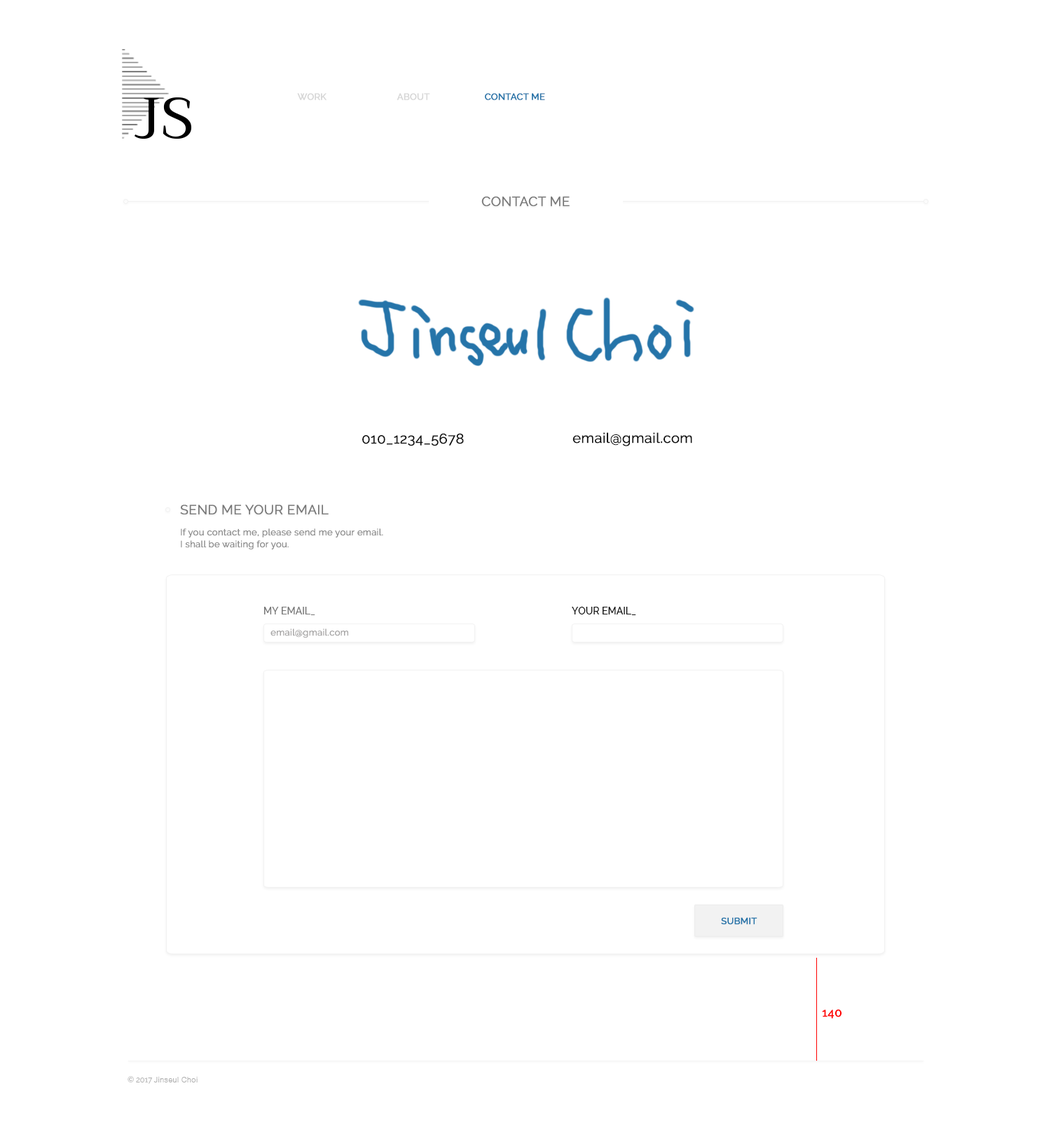
<style>
.page{position:relative;width:1051px;height:1135px;background:#ffffff}
.page>*{position:absolute;margin:0}
.t1{font:9.1px "Raleway-Medium";color:#d7d7d7;font-weight:bold}
.t2{font:9.1px "Raleway-Medium";color:#2574a9;font-weight:bold}
.t3{font:13.3px "Raleway-Regular";color:#777777;text-transform:uppercase;font-weight:bold}
.t4{font:14px "Raleway-Regular";color:#111111;text-transform:uppercase;font-weight:bold}
.t5{font:14px "Raleway-Regular";color:#111111;font-weight:bold}
.t6{font:9.1px "Raleway-Regular";color:#8e8e8e;font-weight:bold}
.t7{font:9.8px "Raleway-Medium";color:#777777;text-transform:uppercase}
.t8{font:9.8px "Raleway-Medium";color:#111111;text-transform:uppercase}
.t9{font:9.1px "Raleway-Regular";color:#a6a5a5;font-weight:bold}
.t10{font:9.1px "Raleway-Medium";color:#2574a9;text-transform:uppercase;font-weight:bold}
.t11{font:11.9px "Raleway-Medium";color:#ff0000;text-transform:uppercase;font-weight:bold}
.t12{font:7.7px "Gulim";color:#afafaf}
.t13{font:7.7px "Raleway-Regular";color:#afafaf}
</style>
<div class="page">
<p class="t1" style="left:297px;top:93px;width:29px;height:7px">WORK</p>
<p class="t1" style="left:396px;top:93px;width:34px;height:7px">ABOUT</p>
<p class="t2" style="left:485px;top:93px;width:60px;height:7px">CONTACT ME</p>
<p class="t3" style="left:481px;top:196px;width:89px;height:11px">contact me</p>
<p class="t4" style="left:362px;top:433px;width:102px;height:13px">010_1234_5678</p>
<p class="t5" style="left:572px;top:432px;width:120px;height:14px">email@gmail.com</p>
<p class="t3" style="left:180px;top:504px;width:149px;height:11px">send me your email</p>
<p class="t6" style="left:181px;top:528px;width:202px;height:10px">If you contact me, please send me your email.</p>
<p class="t6" style="left:181px;top:540px;width:108px;height:10px">I shall be waiting for you.</p>
<p class="t7" style="left:264px;top:607px;width:51px;height:8px">my email_</p>
<p class="t8" style="left:572px;top:607px;width:64px;height:8px">your email_</p>
<p class="t9" style="left:270px;top:628px;width:78px;height:10px">email@gmail.com</p>
<p class="t10" style="left:721px;top:917px;width:36px;height:8px">submit</p>
<p class="t11" style="left:822px;top:1009px;width:19px;height:10px">140</p>
<p class="t12" style="left:127px;top:1076px;width:71px;height:8px"><span class="t13">© 2017 </span>Jinseul Choi</p>
</div>
